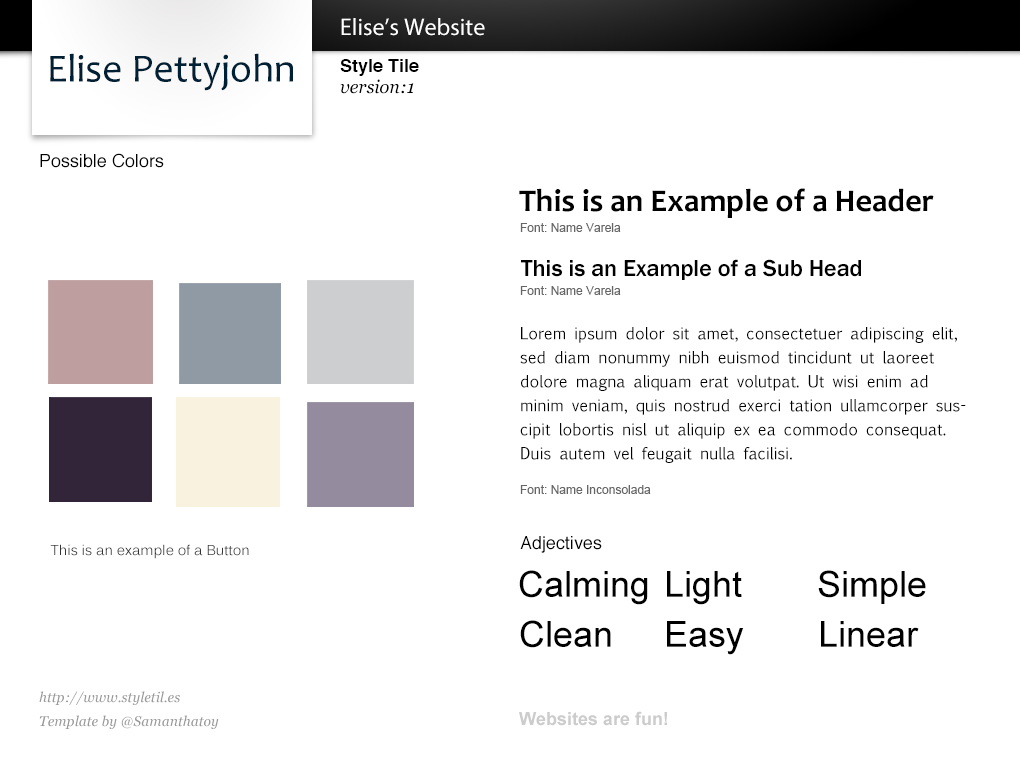
<style>
.page{position:relative;width:1020px;height:760px;background:#ffffff}
.page>*{position:absolute;margin:0}
.t1{font:24px "MyriadPro-Regular";color:#ffffff}
.t2{font:40px "Candara";color:#002035}
.t3{font:18px "Helvetica-Bold";color:#000000}
.t4{font:18px "Georgia-Italic";color:#000000}
.t5{font:18px "Helvetica";color:#000000}
.t6{font:32px "Candara-Bold";color:#000000}
.t7{font:12px "ArialMT";color:#666666}
.t8{font:24px "FranklinGothic-Medium";color:#000000}
.t9{font:16px/24px "EuphemiaCAS";color:#000000}
.t10{font:14px "Kalinga";color:#333333}
.t11{font:36px "ArialMT";color:#000000}
.t12{font:14px/24px "Georgia-Italic";color:#999999}
.t13{font:18px "Arial-BoldMT";color:#cccccc}
</style>
<div class="page">
<p class="t1" style="left:341px;top:18px;width:144px;height:18px">Elise’s Website</p>
<p class="t2" style="left:50px;top:53px;width:243px;height:38px">Elise Pettyjohn</p>
<p class="t3" style="left:340px;top:59px;width:79px;height:17px">Style Tile</p>
<p class="t4" style="left:340px;top:79px;width:74px;height:15px">version:1</p>
<p class="t5" style="left:40px;top:153px;width:124px;height:15px">Possible Colors</p>
<p class="t6" style="left:519px;top:188px;width:415px;height:30px">This is an Example of a Header</p>
<p class="t7" style="left:520px;top:223px;width:101px;height:9px">Font: Name Varela</p>
<p class="t8" style="left:521px;top:259px;width:340px;height:21px">This is an Example of a Sub Head</p>
<p class="t7" style="left:520px;top:286px;width:101px;height:9px">Font: Name Varela</p>
<p class="t9" style="left:520px;top:327px;width:446px;height:136px">Lorem ipsum dolor sit amet, consectetuer adipiscing elit, sed diam nonummy nibh euismod tincidunt ut laoreet dolore magna aliquam erat volutpat. Ut wisi enim ad minim veniam, quis nostrud exerci tation ullamcorper suscipit lobortis nisl ut aliquip ex ea commodo consequat. Duis autem vel feugait nulla facilisi.</p>
<p class="t7" style="left:520px;top:485px;width:131px;height:9px">Font: Name Inconsolada</p>
<p class="t10" style="left:50px;top:544px;width:199px;height:15px">This is an example of a Button</p>
<p class="t5" style="left:520px;top:536px;width:82px;height:17px">Adjectives</p>
<p class="t11" style="left:519px;top:570px;width:129px;height:35px">Calming</p>
<p class="t11" style="left:667px;top:571px;width:75px;height:34px">Light</p>
<p class="t11" style="left:818px;top:570px;width:108px;height:34px">Simple</p>
<p class="t11" style="left:520px;top:620px;width:91px;height:28px">Clean</p>
<p class="t11" style="left:667px;top:621px;width:77px;height:34px">Easy</p>
<p class="t11" style="left:821px;top:621px;width:98px;height:26px">Linear</p>
<p class="t12" style="left:39px;top:691px;width:180px;height:38px">http://www.styletil.es<br>Template by @Samanthatoy</p>
<p class="t13" style="left:519px;top:711px;width:148px;height:15px">Websites are fun!</p>
</div>
